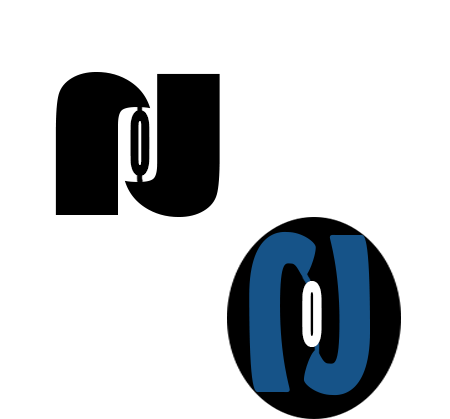
<style>
.page{position:relative;width:450px;height:419px;background:#ffffff}
.page>*{position:absolute;margin:0}
.t1{font:80.8px "Impact";color:#000000;scale:0.5 1}
.t2{font:80.8px "Impact";color:#ffffff;scale:0.5 1}
</style>
<div class="page">
<p class="t1" style="left:130px;top:110px;width:20px;height:66px">O</p>
<p class="t2" style="left:302px;top:281px;width:20px;height:66px">O</p>
</div>
